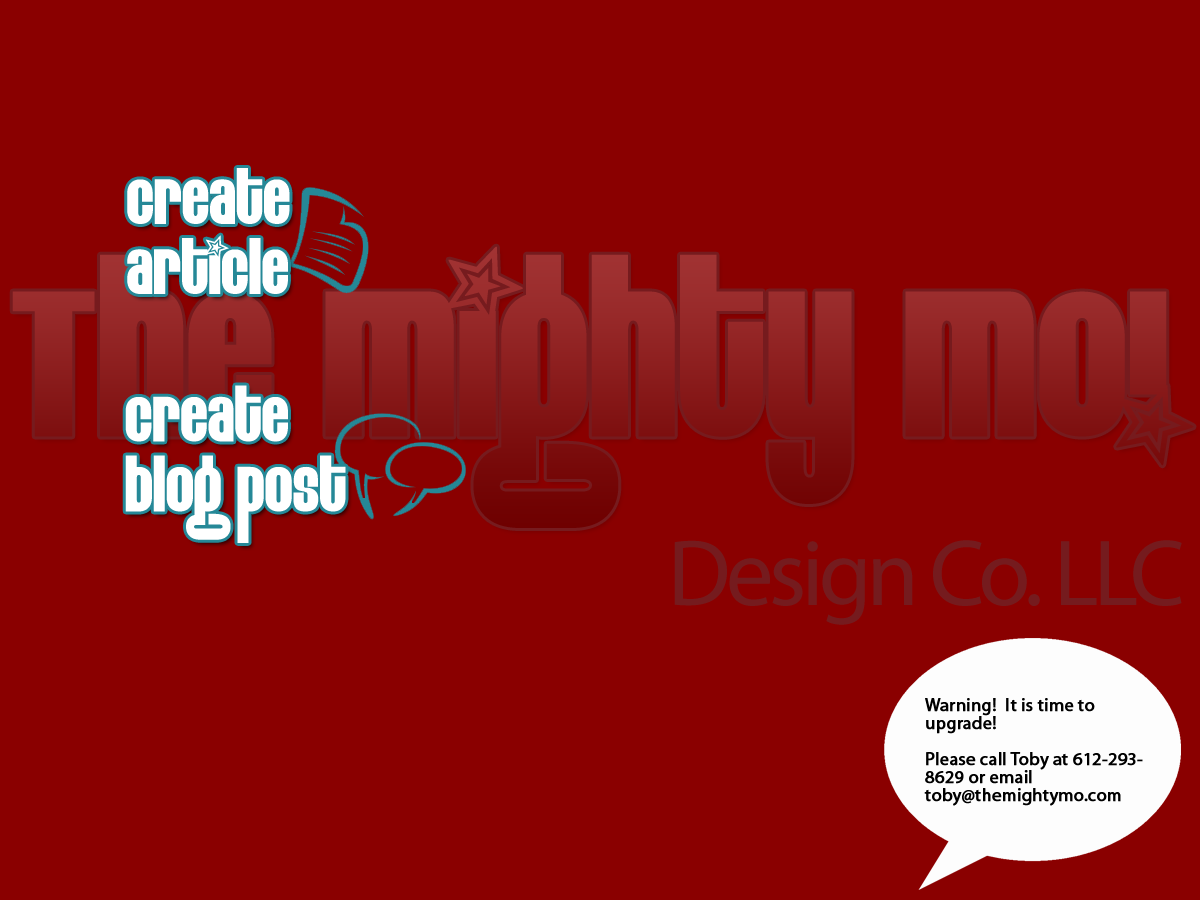
<style>
.page{position:relative;width:1200px;height:900px;background:#8a0000}
.page>*{position:absolute;margin:0}
.t1{font:62.5px/70px "EightTrack";color:#ffffff}
.t2{font:94.6px "MyriadPro-Regular";letter-spacing:-0.05em;color:#751b1e}
.t3{font:18px/18px "MyriadPro-Regular";color:#000000;font-weight:bold}
</style>
<div class="page">
<p class="t1" style="left:127px;top:168px;width:163px;height:126px">create<br>article</p>
<p class="t1" style="left:125px;top:385px;width:221px;height:158px">create<br>blog post</p>
<p class="t2" style="left:674px;top:540px;width:508px;height:85px">Design Co. LLC</p>
<p class="t3" style="left:924px;top:698px;width:219px;height:108px">Warning!  It is time to <br>upgrade!<br><br>Please call Toby at 612-293-8629 or email toby@themightymo.com</p>
</div>
